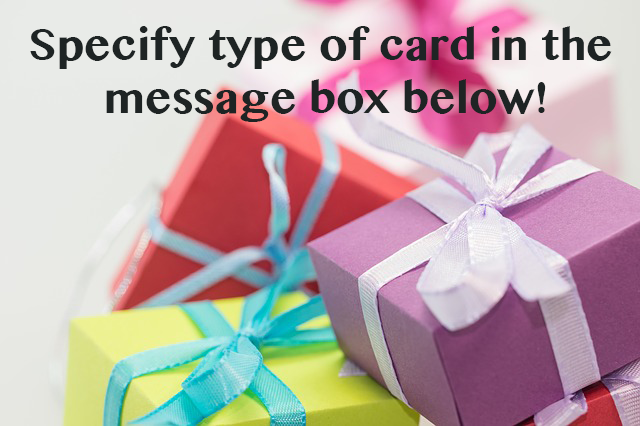
<style>
.page{position:relative;width:640px;height:426px}
.page>*{position:absolute;margin:0}
.t1{font:44px "OriyaMN-Bold";color:#1e2424}
</style>
<div class="page">
<p class="t1" style="left:30px;top:26px;width:582px;height:96px;text-align:center">Specify type of card in the<br> message box below!</p>
</div>
